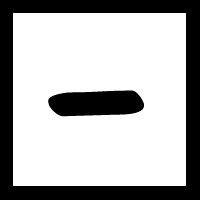
<style>
.page{position:relative;width:200px;height:200px;background:#ffffff}
.page>*{position:absolute;margin:0}
.t1{font:226.7px "MarkerSD";color:#000000}
</style>
<div class="page">
<p class="t1" style="left:48px;top:90px;width:96px;height:27px">-</p>
</div>
